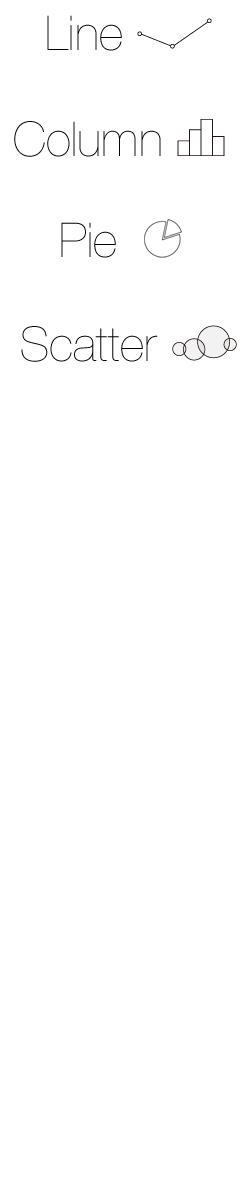
<style>
.page{position:relative;width:250px;height:1200px;background:#ffffff}
.page>*{position:absolute;margin:0}
.t1{font:48px "HelveticaNeueLTStd-UltLt";color:#000000}
</style>
<div class="page">
<p class="t1" style="left:47px;top:15px;width:75px;height:36px">Line</p>
<p class="t1" style="left:14px;top:121px;width:147px;height:36px">Column</p>
<p class="t1" style="left:61px;top:222px;width:55px;height:36px">Pie</p>
<p class="t1" style="left:21px;top:326px;width:137px;height:36px">Scatter</p>
</div>
